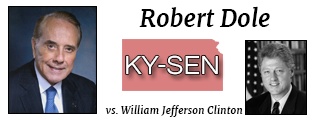
<style>
.page{position:relative;width:317px;height:120px;background:#ffffff}
.page>*{position:absolute;margin:0}
.t1{font:24px "Merriweather-BoldItalic";color:#000000}
.t2{font:27.2px "Questrial-Regular";color:#fffefe}
.t3{font:10.4px "Merriweather-BoldItalic";color:#000000}
</style>
<div class="page">
<p class="t1" style="left:139px;top:6px;width:131px;height:21px">Robert Dole</p>
<p class="t2" style="left:126px;top:55px;width:92px;height:20px">KY-SEN</p>
<p class="t3" style="left:105px;top:105px;width:138px;height:12px">vs. William Jefferson Clinton</p>
</div>
